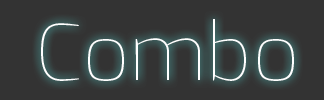
<style>
.page{position:relative;width:324px;height:100px;background:#333333}
.page>*{position:absolute;margin:0}
.t1{font:76.8px "Exo-Thin";color:#ffffff;scale:1.07 1}
</style>
<div class="page">
<p class="t1" style="left:41px;top:19px;width:253px;height:62px">Combo</p>
</div>
